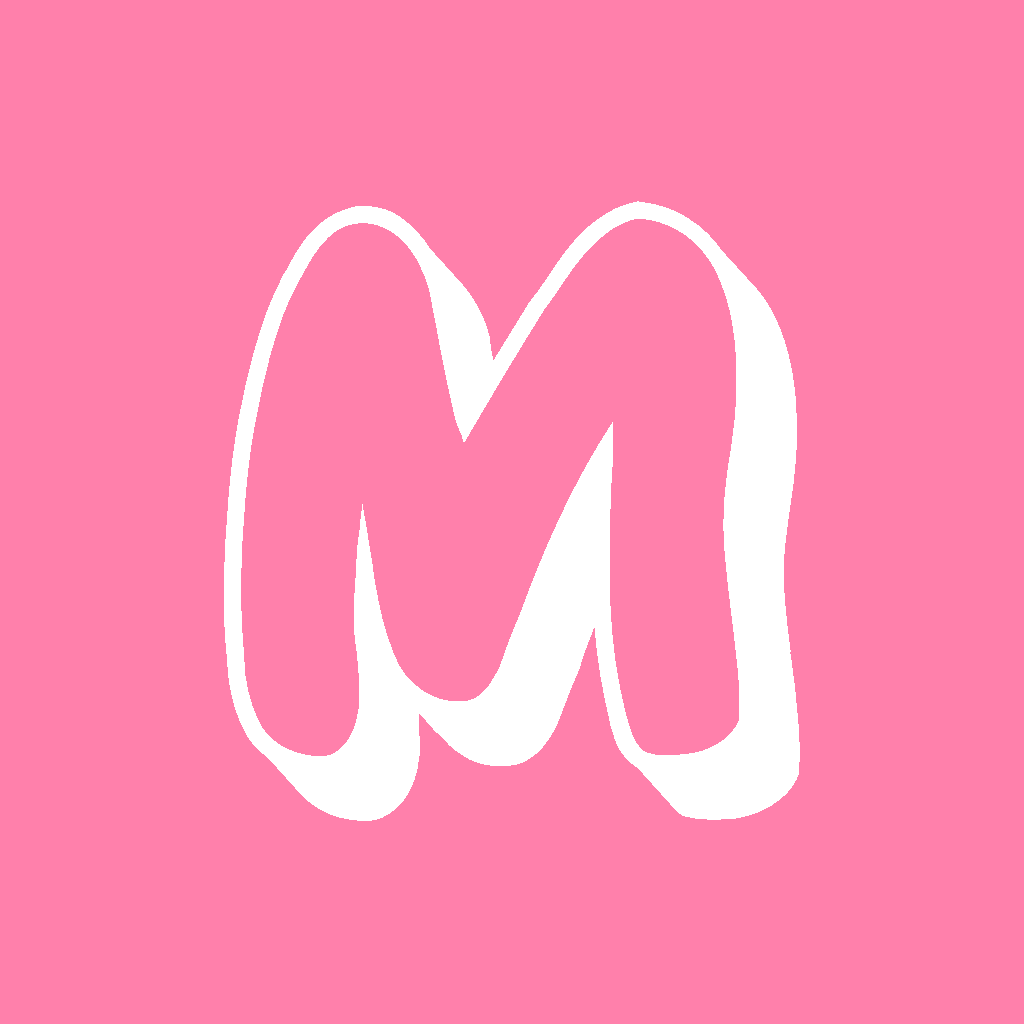
<style>
.page{position:relative;width:1024px;height:1024px;background:#ff80ab}
.page>*{position:absolute;margin:0}
.t1{font:800px "ActionManShaded";color:#ffffff}
</style>
<div class="page">
<p class="t1" style="left:223px;top:201px;width:578px;height:621px">M</p>
</div>
